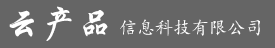
<style>
.page{position:relative;width:275px;height:48px;background:#656565}
.page>*{position:absolute;margin:0}
.t1{font:36px "STXingkai";color:#ffffff}
.t2{font:18px "¿¬Ìå";color:#ffffff}
</style>
<div class="page">
<p class="t1" style="left:9px;top:6px;width:99px;height:35px">云产品</p>
<p class="t2" style="left:120px;top:19px;width:140px;height:17px">信息科技有限公司</p>
</div>
